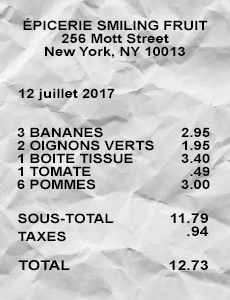
<style>
.page{position:relative;width:230px;height:300px}
.page>*{position:absolute;margin:0}
.t1{font:12.8px/13px "Arial-BoldMT";color:#030000;scale:1.18 1}
.t2{font:12.8px "Arial-BoldMT";color:#030000;scale:1.18 1}
.t3{font:13.6px/13px "Arial-BoldMT";color:#030000;scale:1.18 1}
.t4{font:13.6px "Arial-BoldMT";color:#030000;scale:1.18 1}
</style>
<div class="page">
<p class="t1" style="left:23px;top:18px;width:185px;height:40px;text-align:center">ÉPICERIE SMILING FRUIT<br>256 Mott Street<br>New York, NY 10013</p>
<p class="t2" style="left:19px;top:88px;width:96px;height:13px">12 juillet 2017</p>
<p class="t1" style="left:17px;top:127px;width:137px;height:63px">3 BANANES<br>2 OIGNONS VERTS<br>1 BOITE TISSUE<br>1 TOMATE<br>6 POMMES</p>
<p class="t1" style="left:181px;top:127px;width:29px;height:62px;text-align:right">2.95<br>1.95<br>3.40<br>.49<br>3.00</p>
<p class="t2" style="left:18px;top:213px;width:96px;height:29px">SOUS-TOTAL<br>TAXES</p>
<p class="t3" style="left:170px;top:213px;width:39px;height:23px;text-align:right">11.79<br>.94</p>
<p class="t4" style="left:18px;top:260px;width:52px;height:11px">TOTAL</p>
<p class="t4" style="left:169px;top:260px;width:39px;height:10px">12.73</p>
</div>
